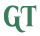
<style>
.page{position:relative;width:40px;height:36px;background:#ffffff}
.page>*{position:absolute;margin:0}
.t1{font:28.8px "CinzelDecorative-Black";letter-spacing:0.1em;color:#3b7c5d;scale:0.67 1}
</style>
<div class="page">
<p class="t1" style="left:4px;top:5px;width:33px;height:28px">GT</p>
</div>
